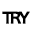
<style>
.page{position:relative;width:32px;height:32px;background:#ffffff}
.page>*{position:absolute;margin:0}
.t1{font:14.4px "HiraKakuPro-W6";letter-spacing:-0.2em;color:#000000;font-weight:bold}
</style>
<div class="page">
<p class="t1" style="left:2px;top:11px;width:28px;height:13px">TRY</p>
</div>
